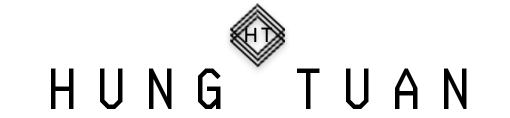
<style>
.page{position:relative;width:510px;height:118px;background:#ffffff}
.page>*{position:absolute;margin:0}
.t1{font:19.5px "Gen-Regular";letter-spacing:0.2em;color:#000000;scale:0.96 1}
.t2{font:96px "Computer-says-no";letter-spacing:0.2em;color:#000000}
</style>
<div class="page">
<p class="t1" style="left:245px;top:27px;width:28px;height:15px">HT</p>
<p class="t2" style="left:51px;top:68px;width:416px;height:41px">HUNG TUAN</p>
</div>
